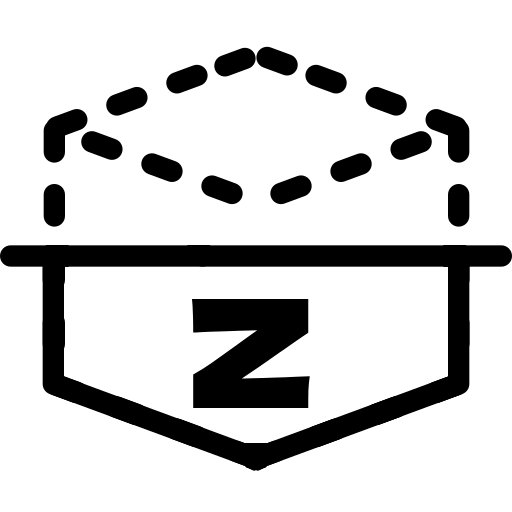
<style>
.page{position:relative;width:512px;height:512px;background:#ffffff}
.page>*{position:absolute;margin:0}
.t1{font:150px "DelaGothicOne-Regular";color:#000000}
</style>
<div class="page">
<p class="t1" style="left:192px;top:299px;width:118px;height:109px">Z</p>
</div>
